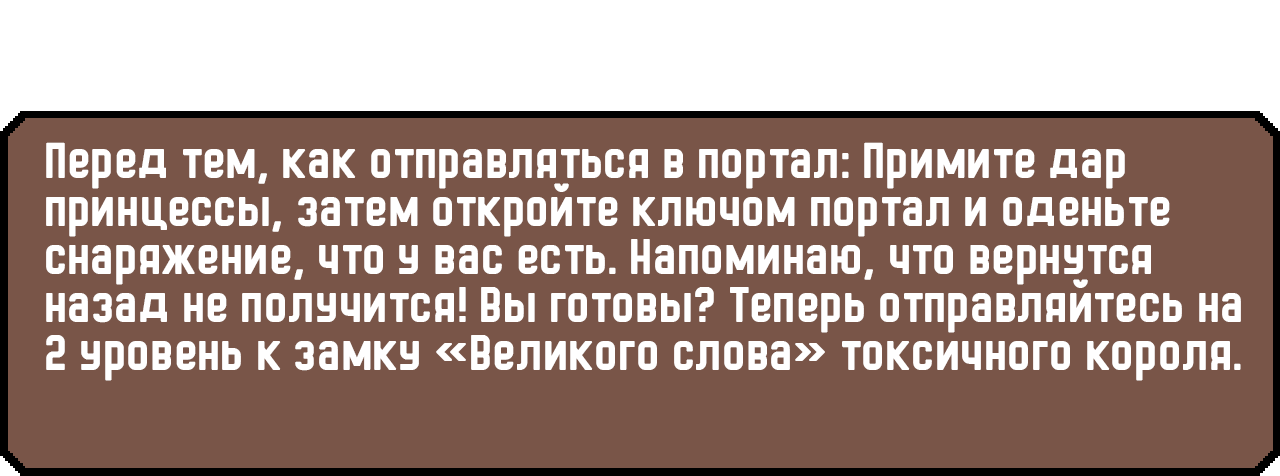
<style>
.page{position:relative;width:1280px;height:476px;background:#795548}
.page>*{position:absolute;margin:0}
.t1{font:48px/48px "HermanoMayor";color:#ffffff}
</style>
<div class="page">
<p class="t1" style="left:46px;top:142px;width:1195px;height:239px">Перед тем, как отправляться в портал: Примите дар принцессы, затем откройте ключом портал и оденьте снаряжение, что у вас есть. Напоминаю, что вернутся назад не получится! Вы готовы? Теперь отправляйтесь на 2 уровень к замку «Великого слова» токсичного короля.</p>
</div>
